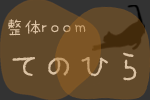
<style>
.page{position:relative;width:150px;height:100px;background:#61492a}
.page>*{position:absolute;margin:0}
.t1{font:18.2px/30.4px "KodomoRounded-Light";color:#dbc3a4}
.t2{font:35.5px/30.4px "KodomoRounded-Light";color:#dbc3a4}
</style>
<div class="page">
<p class="t1" style="left:8px;top:19px;width:129px;height:62px">整体room<br><span class="t2">てのひら</span></p>
</div>
